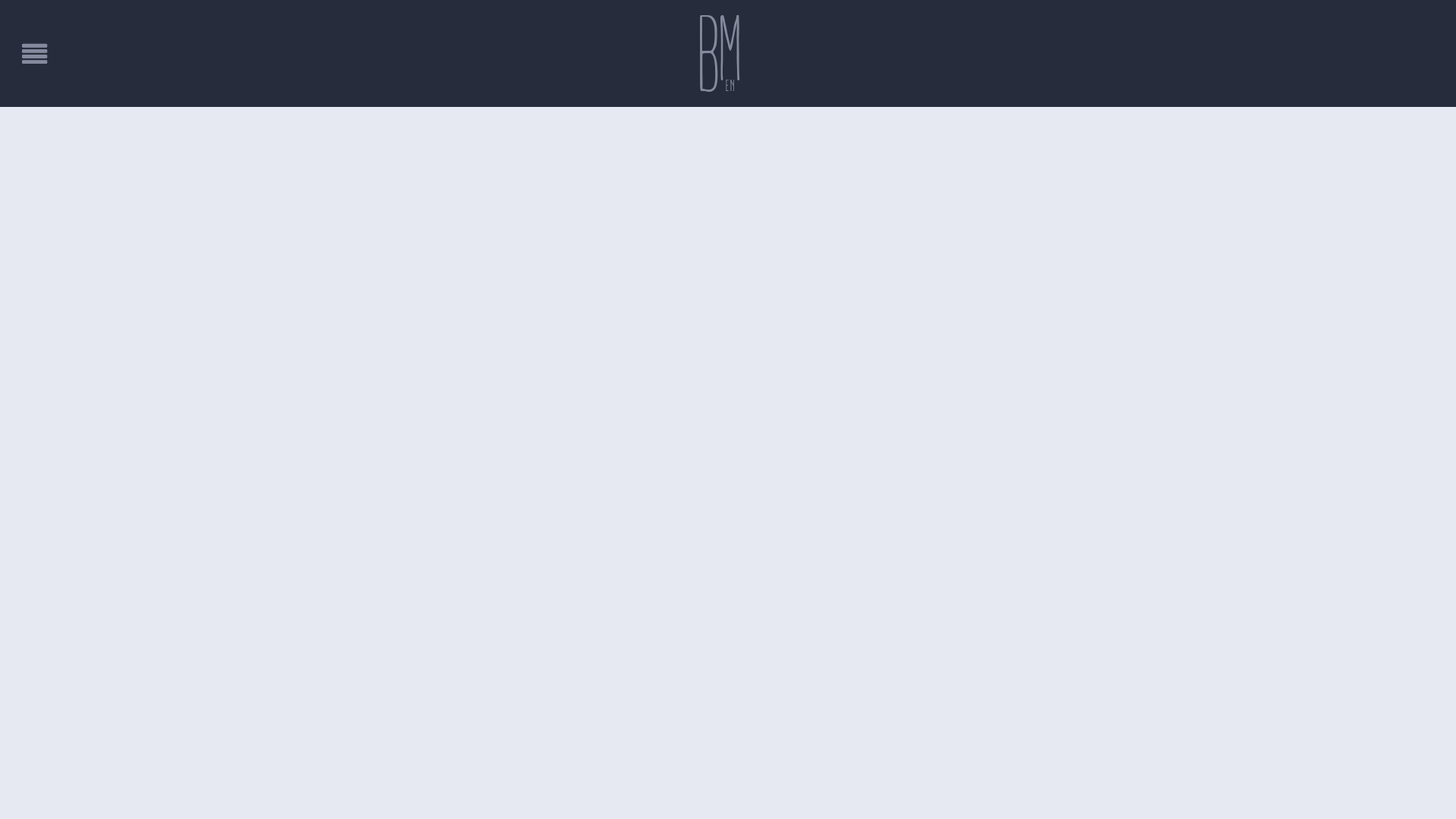
<style>
.page{position:relative;width:1456px;height:819px;background:#e6e9f2}
.page>*{position:absolute;margin:0}
.t1{font:15.8px "ADAYWITHOUTSUN";letter-spacing:0.1em;color:#868a9e}
.t2{font:104.3px "ADAYWITHOUTSUN";letter-spacing:0.06em;color:#868a9e}
.t3{font:88.5px "ADAYWITHOUTSUN";letter-spacing:0.08em;color:#868a9e}
</style>
<div class="page">
<p class="t1" style="left:700px;top:15px;width:34px;height:77px"><span class="t2">B</span>EN</p>
<p class="t3" style="left:720px;top:15px;width:20px;height:65px">M</p>
</div>
